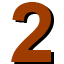
<style>
.page{position:relative;width:64px;height:64px;background:#ffffff}
.page>*{position:absolute;margin:0}
.t1{font:83.3px "Arial-BoldMT";color:#9f3c00}
</style>
<div class="page">
<p class="t1" style="left:11px;top:2px;width:40px;height:60px">2</p>
</div>
